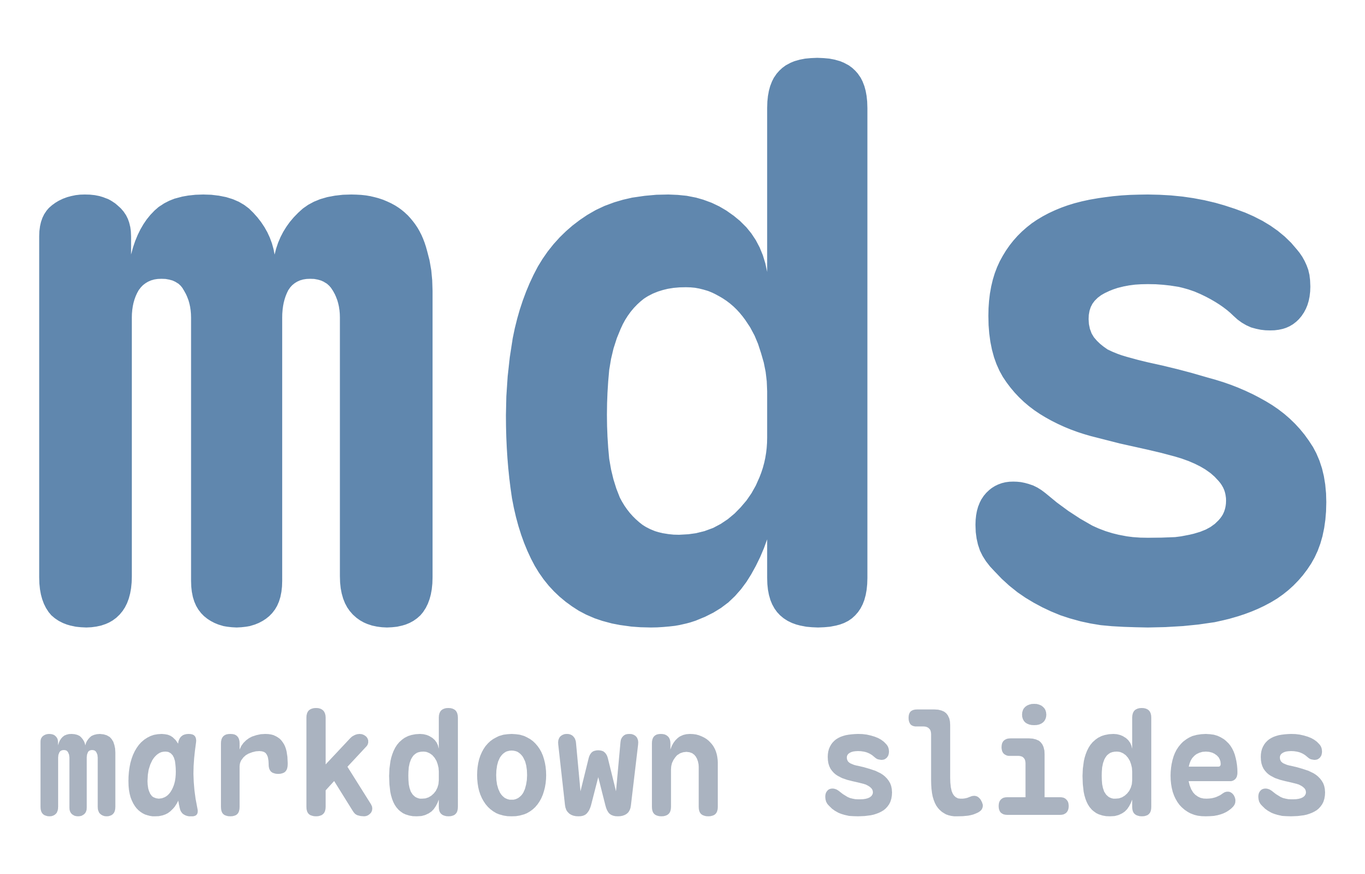
<style>
.page{position:relative;width:1365px;height:874px;background:#ffffff}
.page>*{position:absolute;margin:0}
.t1{font:759.3px "MapleMono-NF-Bold";color:#6087ae}
.t2{font:144.4px "MapleMono-NF-Bold";color:#aab3c0}
</style>
<div class="page">
<p class="t1" style="left:39px;top:58px;width:1287px;height:569px">mds</p>
<p class="t2" style="left:40px;top:704px;width:1285px;height:112px">markdown slides</p>
</div>
